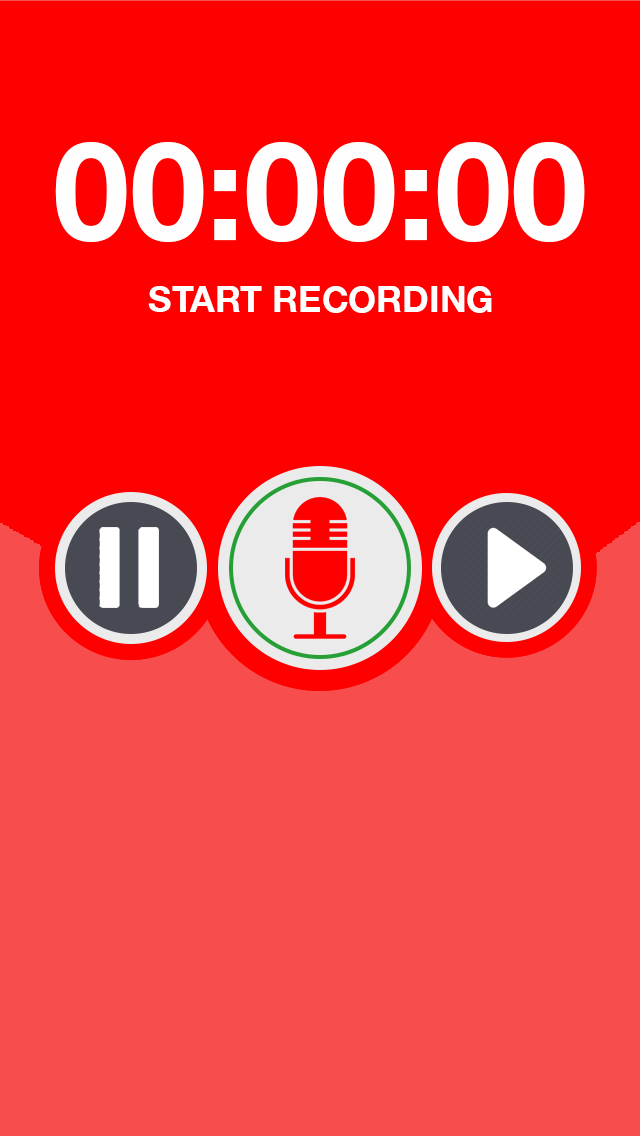
<style>
.page{position:relative;width:640px;height:1136px;background:#f84d4d}
.page>*{position:absolute;margin:0}
.t1{font:137.3px "HelveticaNeue-Bold";color:#fefefe}
.t2{font:36px "HelveticaNeue-Bold";color:#fefefe}
</style>
<div class="page">
<p class="t1" style="left:55px;top:142px;width:530px;height:100px">00:00:00</p>
<p class="t2" style="left:148px;top:286px;width:344px;height:27px">START RECORDING</p>
</div>
